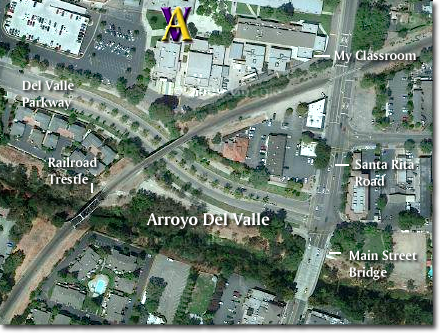
<style>
.page{position:relative;width:441px;height:333px}
.page>*{position:absolute;margin:0}
.t1{font:14px "AmerigoBT-BoldA";color:#ffffff}
.t2{font:18px "AmerigoBT-BoldA";color:#ffffff}
</style>
<div class="page">
<p class="t1" style="left:334px;top:50px;width:82px;height:13px">My Classroom</p>
<p class="t1" style="left:22px;top:80px;width:52px;height:30px">Del Valle <br>Parkway</p>
<p class="t1" style="left:48px;top:157px;width:49px;height:27px">Railroad<br>Trestle</p>
<p class="t1" style="left:355px;top:159px;width:59px;height:27px">Santa Rita<br>Road</p>
<p class="t2" style="left:146px;top:212px;width:124px;height:17px">Arroyo Del Valle</p>
<p class="t1" style="left:349px;top:250px;width:68px;height:30px">Main Street<br>Bridge</p>
</div>
